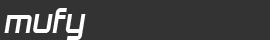
<style>
.page{position:relative;width:270px;height:40px;background:#333333}
.page>*{position:absolute;margin:0}
.t1{font:31.5px "Orbitron-Bold";color:#ffffff;font-style:italic;scale:0.91 1}
</style>
<div class="page">
<p class="t1" style="left:4px;top:8px;width:82px;height:32px">mufy</p>
</div>
